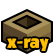
<style>
.page{position:relative;width:55px;height:55px;background:#ffffff}
.page>*{position:absolute;margin:0}
.t1{font:16px "GROBOLD";color:#ffc000}
</style>
<div class="page">
<p class="t1" style="left:7px;top:38px;width:42px;height:13px">x-ray</p>
</div>
